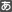
<style>
.page{position:relative;width:12px;height:12px;background:#4a4a4a}
.page>*{position:absolute;margin:0}
.t1{font:11px "LCGothic";color:#ffffff}
</style>
<div class="page">
<p class="t1" style="left:1px;top:1px;width:10px;height:10px">あ</p>
</div>
